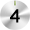
<style>
.page{position:relative;width:30px;height:30px}
.page>*{position:absolute;margin:0}
.t1{font:18.3px "ArialMT";color:#000000;text-transform:uppercase;font-weight:bold}
</style>
<div class="page">
<p class="t1" style="left:10px;top:9px;width:10px;height:14px">4</p>
</div>
